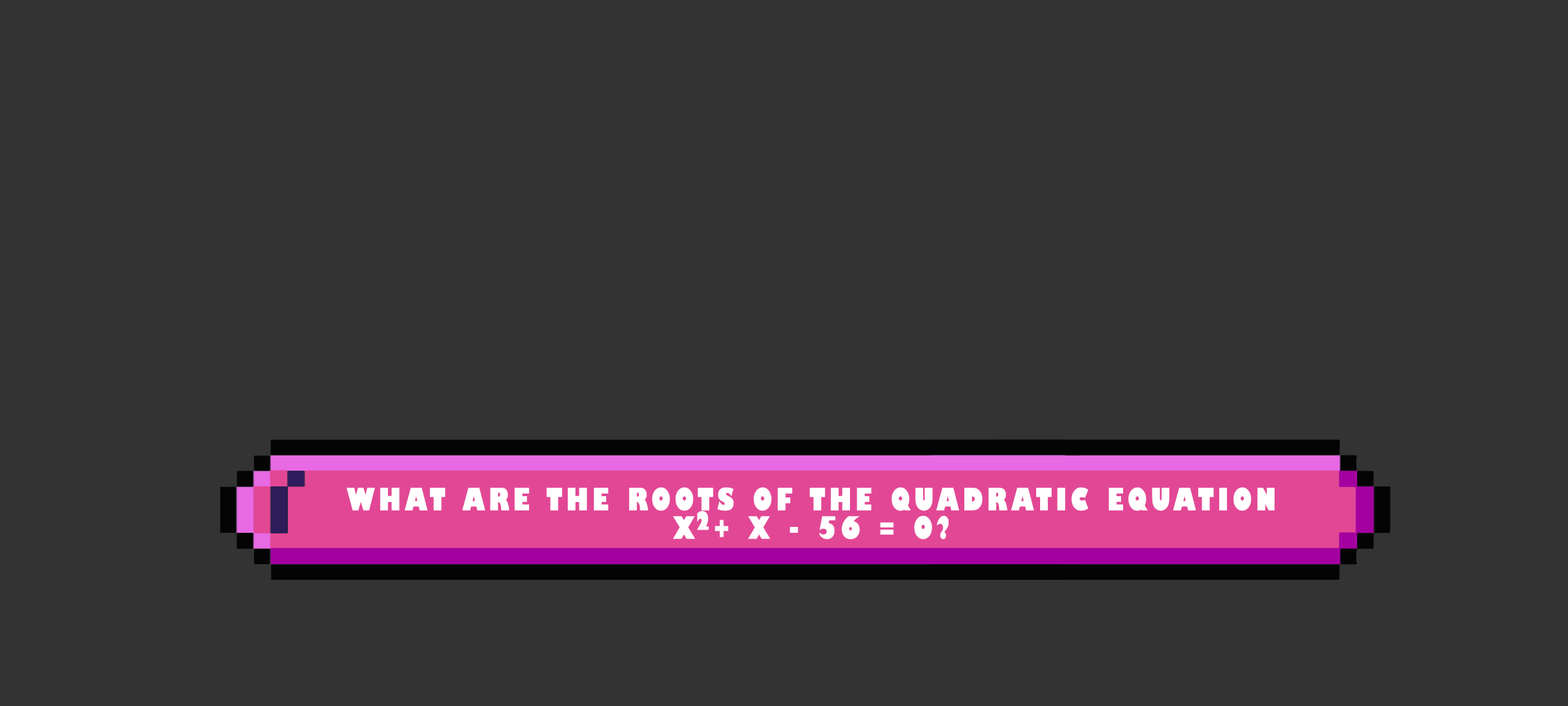
<style>
.page{position:relative;width:1568px;height:706px;background:#333333}
.page>*{position:absolute;margin:0}
.t1{font:30px/28.4px "GillSans-UltraBoldCondensed";letter-spacing:0.115em;color:#ffffff;text-transform:uppercase;scale:1.12 1}
.t2{font:24.5px "GillSans-UltraBoldCondensed";letter-spacing:0.115em;color:#ffffff;text-transform:uppercase;scale:1.12 1}
</style>
<div class="page">
<p class="t1" style="left:346px;top:487px;width:929px;height:52px;text-align:center">What are the roots of the quadratic equation<br>x + x - 56 = 0?</p>
<p class="t2" style="left:697px;top:510px;width:12px;height:20px">2</p>
</div>
